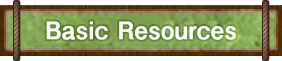
<style>
.page{position:relative;width:282px;height:61px}
.page>*{position:absolute;margin:0}
.t1{font:24px "FutoGoB101Pr5-Bold";color:#fffffa;font-weight:bold}
</style>
<div class="page">
<p class="t1" style="left:46px;top:21px;width:190px;height:19px">Basic Resources</p>
</div>
